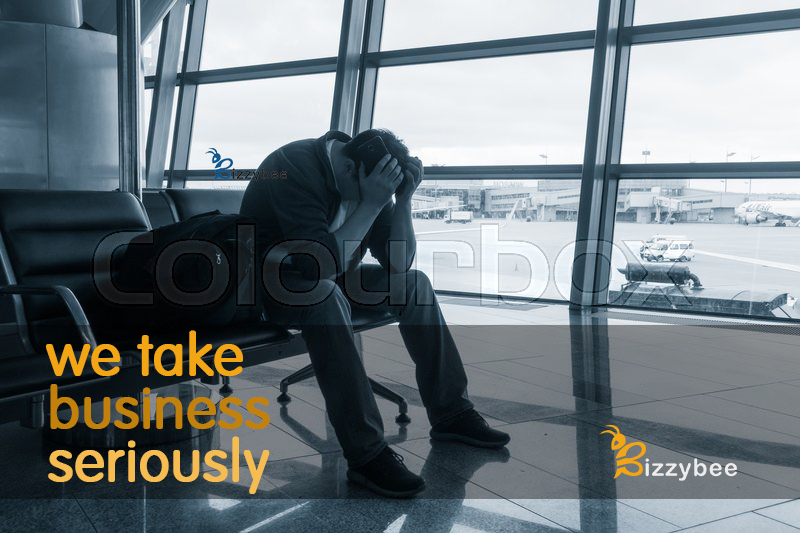
<style>
.page{position:relative;width:800px;height:533px}
.page>*{position:absolute;margin:0}
.t1{font:57.5px "Arial-Rounded";color:#f2a615;font-weight:bold}
.t2{font:57.5px "Arial-Rounded";color:#314896;font-weight:bold}
.t3{font:57.5px "Arial-Rounded";color:#c1810b;font-weight:bold}
.t4{font:57.5px "Arial-Rounded";color:#f5bc51;font-weight:bold}
.t5{font:57.5px "LaoUI";color:#314896;font-weight:bold}
</style>
<div class="page">
<p class="t1" style="left:46px;top:330px;width:197px;height:46px"><span class="t2"> </span>we take</p>
<p class="t3" style="left:50px;top:384px;width:220px;height:45px">business</p>
<p class="t4" style="left:48px;top:436px;width:222px;height:58px"><span class="t5"> </span>seriously</p>
</div>
